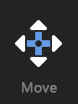
<style>
.page{position:relative;width:78px;height:104px;background:#232323}
.page>*{position:absolute;margin:0}
.t1{font:14px "SegoeUI";color:#7c7c7c;font-weight:bold}
</style>
<div class="page">
<p class="t1" style="left:22px;top:82px;width:35px;height:11px">Move</p>
</div>
